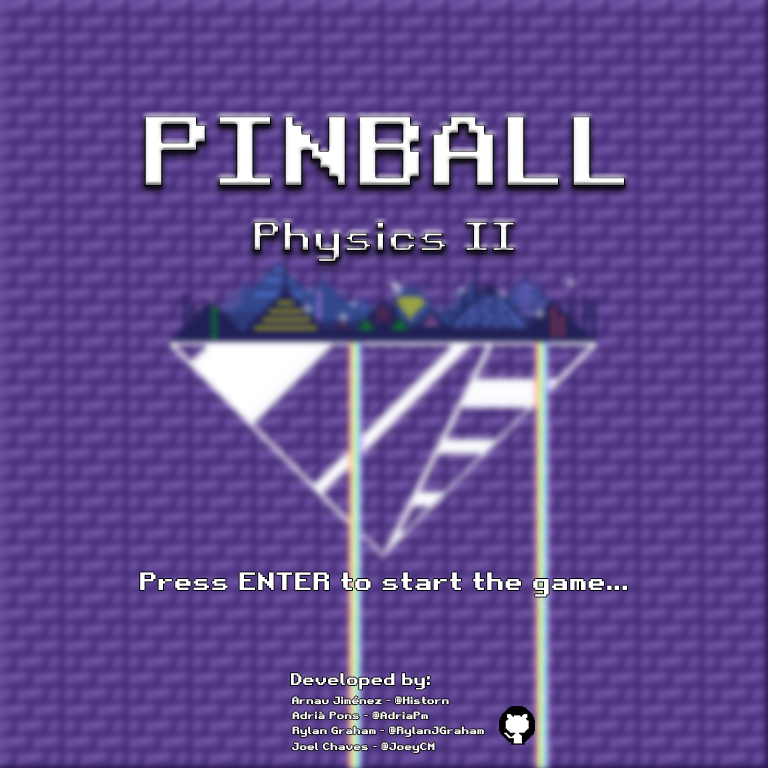
<style>
.page{position:relative;width:768px;height:768px}
.page>*{position:absolute;margin:0}
.t1{font:96px "RetroGaming";color:#ffffff}
.t2{font:40px "RetroGaming"}
.t3{font:24px "RetroGaming";color:#ffffff}
.t4{font:16px "RetroGaming";color:#ffffff}
.t5{font:10px "RetroGaming";color:#ffffff}
</style>
<div class="page">
<p class="t1" style="left:144px;top:116px;width:481px;height:70px">PINBALL</p>
<p class="t2" style="left:253px;top:222px;width:262px;height:40px">Physics II</p>
<p class="t3" style="left:140px;top:572px;width:487px;height:25px">Press ENTER to start the game...</p>
<p class="t4" style="left:291px;top:673px;width:139px;height:17px">Developed by:</p>
<p class="t5" style="left:292px;top:696px;width:157px;height:9px">Arnau Jiménez - @Historn</p>
<p class="t5" style="left:292px;top:711px;width:136px;height:9px">Adrià Pons - @AdriaPm</p>
<p class="t5" style="left:292px;top:726px;width:192px;height:11px">Rylan Graham - @RylanJGraham</p>
<p class="t5" style="left:292px;top:742px;width:143px;height:11px">Joel Chaves - @JoeyCM</p>
</div>
